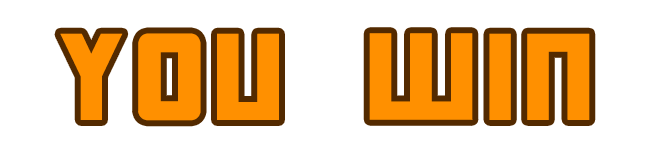
<style>
.page{position:relative;width:650px;height:154px;background:#ffffff}
.page>*{position:absolute;margin:0}
.t1{font:138.2px "TransformersMovie";letter-spacing:0.1em;color:#ff9000;scale:0.9 1}
</style>
<div class="page">
<p class="t1" style="left:60px;top:33px;width:530px;height:88px">YOU WIN</p>
</div>
